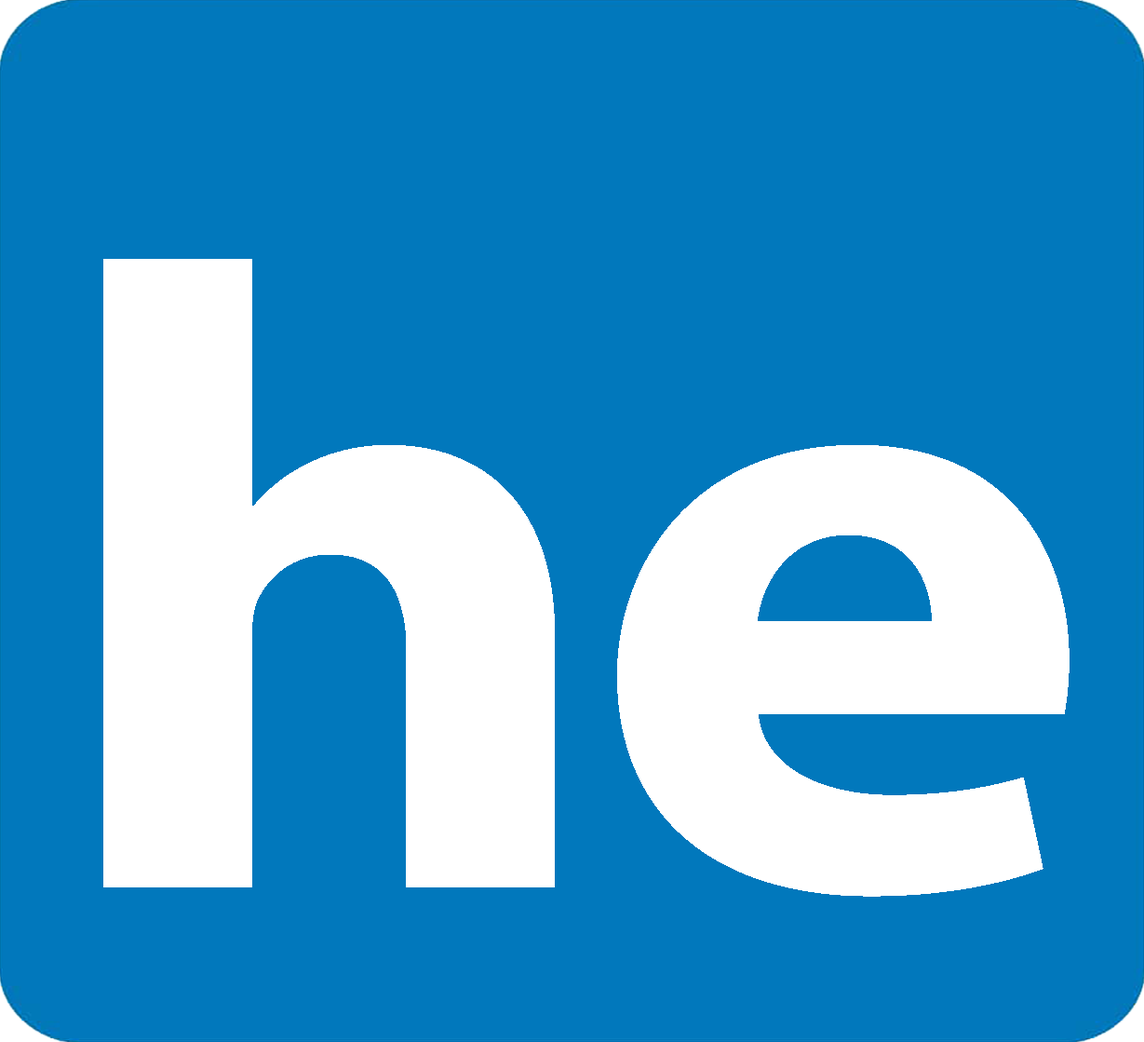
<style>
.page{position:relative;width:1144px;height:1042px;background:#0178bc}
.page>*{position:absolute;margin:0}
.t1{font:884.1px "MyriadPro-Bold";letter-spacing:-0.03em;color:#ffffff;scale:1.1 1}
</style>
<div class="page">
<p class="t1" style="left:103px;top:259px;width:967px;height:638px">he</p>
</div>
